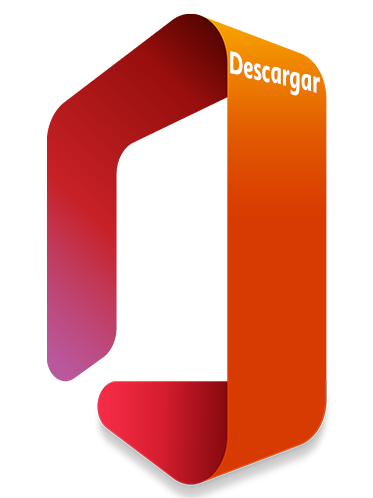
<style>
.page{position:relative;width:373px;height:498px;background:#ffffff}
.page>*{position:absolute;margin:0}
.t1{font:32.6px "SegoeUI-BoldItalic";color:#ffffff;scale:0.61 1}
</style>
<div class="page">
<p class="t1" style="left:230px;top:51px;width:90px;height:45px;rotate:12deg">Descargar</p>
</div>
